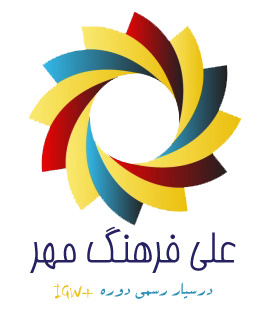
<style>
.page{position:relative;width:272px;height:323px;background:#ffffff}
.page>*{position:absolute;margin:0}
.t1{font:41.9px "BBardiya";color:#262161}
.t2{font:20.8px "Chiller-Regular";color:#ebc210}
.t3{font:20.8px "BSepideh";color:#2f93b7}
</style>
<div class="page">
<p class="t1" style="left:30px;top:226px;width:206px;height:47px">علی فرهنگ مهر</p>
<p class="t2" style="left:53px;top:284px;width:40px;height:16px">+IGW</p>
<p class="t3" style="left:100px;top:282px;width:113px;height:17px">درسیار رسمی دوره</p>
</div>
